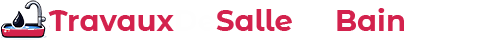
<style>
.page{position:relative;width:480px;height:40px;background:#ffffff}
.page>*{position:absolute;margin:0}
.t1{font:29px "MontserratAlternates-Bold";color:#d3224d}
.t2{font:29px "MontserratAlternates-Bold";color:#fefefe}
.t3{font:29px "MontserratAlternates-Bold";color:#ffffff}
</style>
<div class="page">
<p class="t1" style="left:48px;top:8px;width:430px;height:23px">Travaux<span class="t2">De</span>Salle<span class="t3">De</span>Bain<span class="t3">.com</span></p>
</div>
